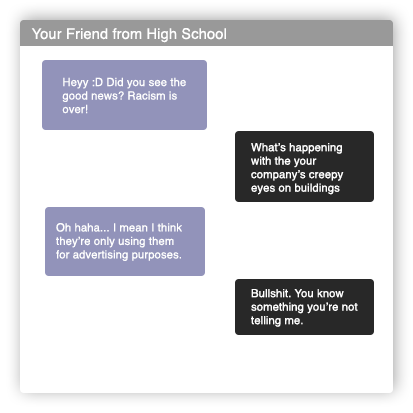
<style>
.page{position:relative;width:413px;height:413px;background:#ffffff}
.page>*{position:absolute;margin:0}
.t1{font:14.6px "Helvetica";letter-spacing:0.01em;color:#ffffff}
.t2{font:11.2px "Helvetica";letter-spacing:0.01em;color:#ffffff}
</style>
<div class="page">
<p class="t1" style="left:31px;top:28px;width:195px;height:15px">Your Friend from High School</p>
<p class="t2" style="left:62px;top:77px;width:124px;height:37px">Heyy :D Did you see the<br>good news? Racism is<br>over!</p>
<p class="t2" style="left:251px;top:143px;width:93px;height:52px">What’s happening<br>with the your <br>company’s creepy <br>eyes on buildings</p>
<p class="t2" style="left:56px;top:223px;width:126px;height:38px">Oh haha... I mean I think<br>they’re only using them<br>for advertising purposes.</p>
<p class="t2" style="left:251px;top:289px;width:107px;height:38px">Bullshit. You know<br>something you’re not<br>telling me.</p>
</div>
